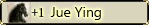
<style>
.page{position:relative;width:149px;height:25px;background:#d9d5bd}
.page>*{position:absolute;margin:0}
.t1{font:14px "LaoUI";color:#000000}
</style>
<div class="page">
<p class="t1" style="left:50px;top:7px;width:51px;height:13px">Jue Ying</p>
</div>
